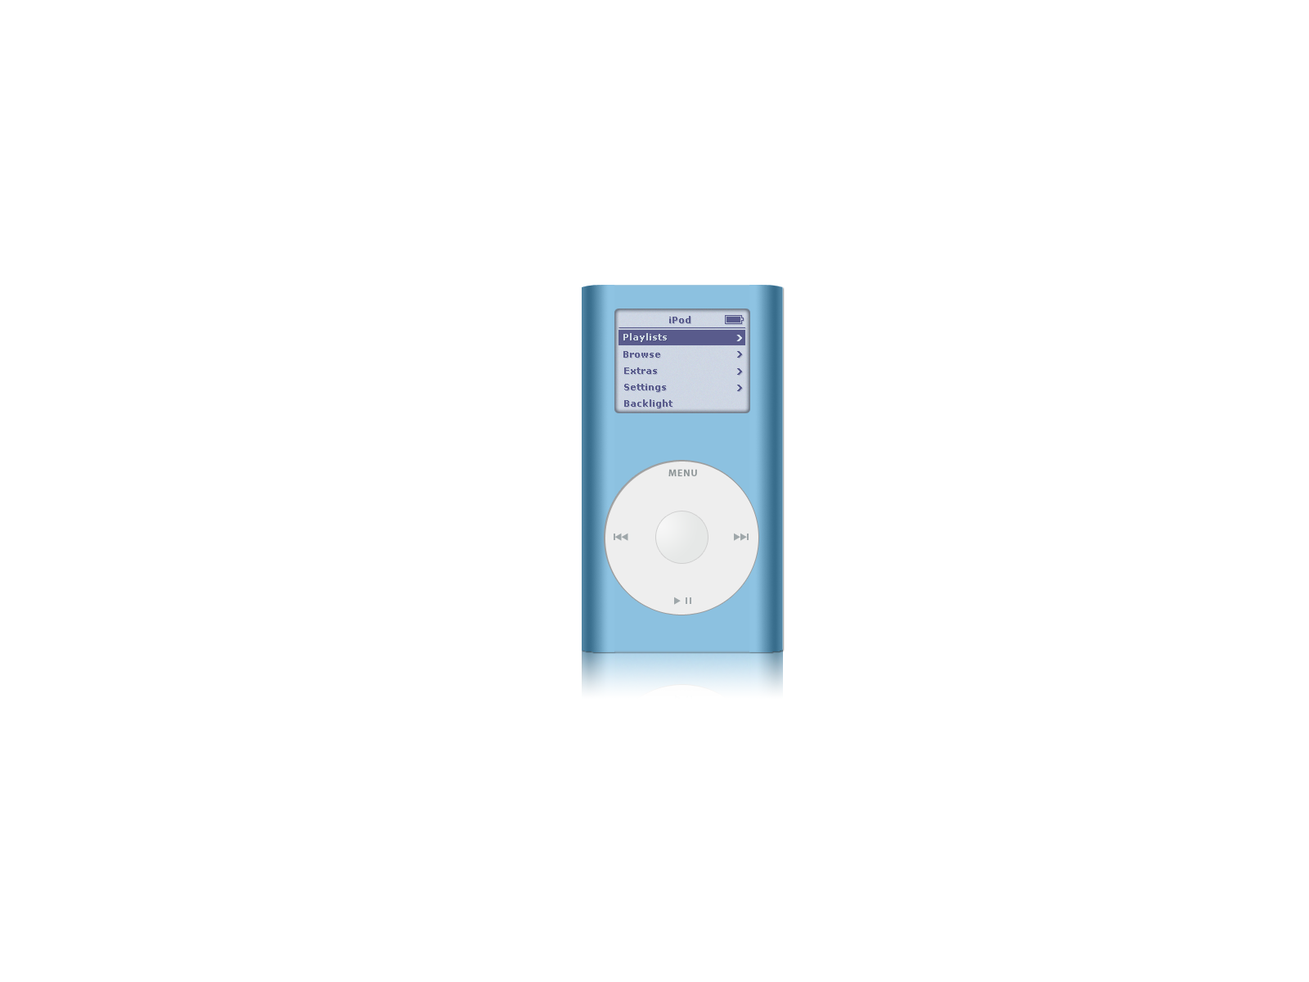
<style>
.page{position:relative;width:1309px;height:982px;background:#ffffff}
.page>*{position:absolute;margin:0}
.t1{font:9px "Verdana-Bold";color:#ced9e1}
.t2{font:9px "Verdana-Bold";color:#595b8c}
.t3{font:9.8px "Myriad-Bold";letter-spacing:0.075em;color:#8d9597}
</style>
<div class="page">
<p class="t1" style="left:623px;top:333px;width:44px;height:9px">Playlists</p>
<p class="t2" style="left:623px;top:351px;width:37px;height:7px">Browse</p>
<p class="t2" style="left:624px;top:367px;width:33px;height:7px">Extras</p>
<p class="t2" style="left:624px;top:384px;width:42px;height:8px">Settings</p>
<p class="t2" style="left:624px;top:399px;width:49px;height:9px">Backlight</p>
<p class="t3" style="left:668px;top:469px;width:29px;height:7px">MENU</p>
</div>
